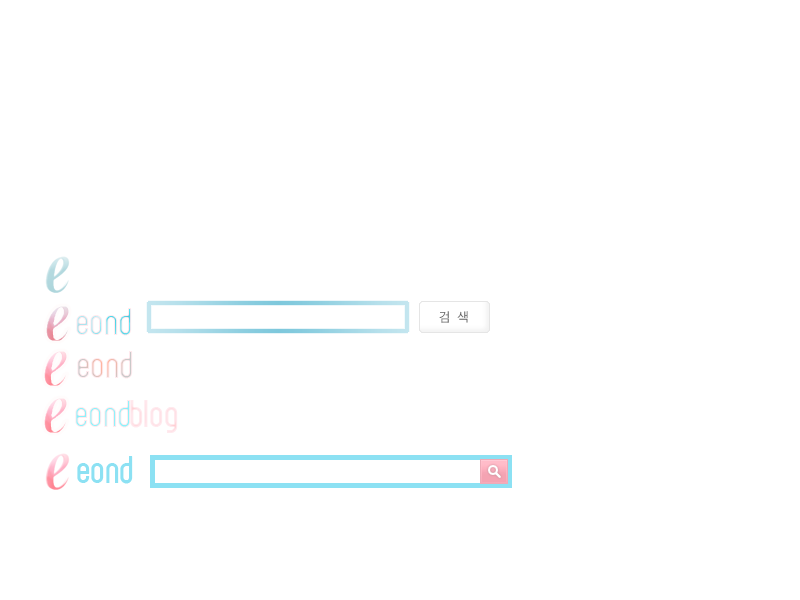
<style>
.page{position:relative;width:800px;height:600px;background:#ffffff}
.page>*{position:absolute;margin:0}
.t1{font:36px "071MKSD-01Medium"}
.t2{font:36px "071MKSD-01Medium";color:#ffe6eb}
.t3{font:36px "071MKSD-01Medium";color:#8ce1f3}
</style>
<div class="page">
<p class="t1" style="left:76px;top:308px;width:56px;height:28px">eond</p>
<p class="t1" style="left:77px;top:351px;width:56px;height:28px">eond</p>
<p class="t1" style="left:75px;top:400px;width:56px;height:28px">eond</p>
<p class="t2" style="left:130px;top:400px;width:48px;height:33px">blog</p>
<p class="t3" style="left:77px;top:456px;width:56px;height:28px">eond</p>
</div>
